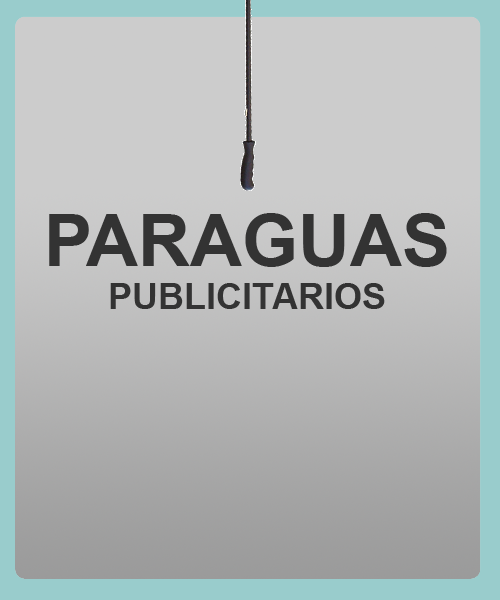
<style>
.page{position:relative;width:500px;height:600px;background:#cccccc}
.page>*{position:absolute;margin:0}
.t1{font:36px "Arial-BoldMT";color:#333333}
.t2{font:72px "Arial-BoldMT";color:#333333}
</style>
<div class="page">
<p class="t1" style="left:49px;top:213px;width:398px;height:96px;text-align:center"><span class="t2">PARAGUAS<br></span>PUBLICITARIOS</p>
</div>
